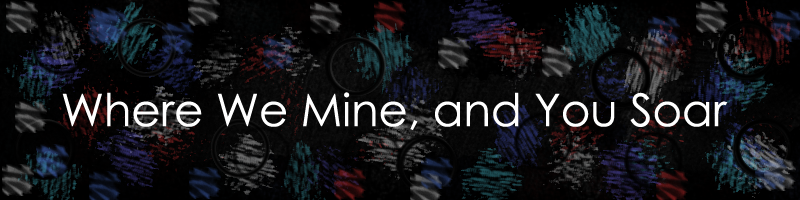
<style>
.page{position:relative;width:800px;height:200px}
.page>*{position:absolute;margin:0}
.t1{font:45px "CenturyGothic";color:#ffffff}
</style>
<div class="page">
<p class="t1" style="left:62px;top:92px;width:666px;height:38px">Where We Mine, and You Soar</p>
</div>
